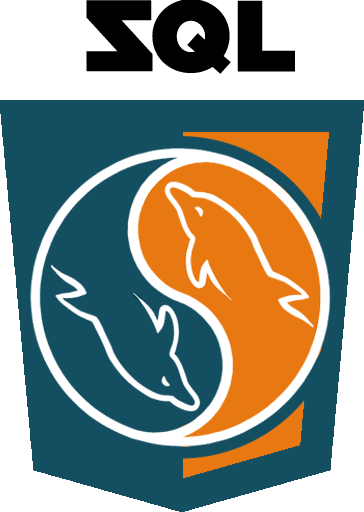
<style>
.page{position:relative;width:364px;height:512px;background:#134e61}
.page>*{position:absolute;margin:0}
.t1{font:100px "GothamUltra";color:#000000;font-weight:bold}
</style>
<div class="page">
<p class="t1" style="left:86px;top:0px;width:67px;height:72px;rotate:180deg">Z</p>
<p class="t1" style="left:152px;top:0px;width:143px;height:74px">QL</p>
</div>
